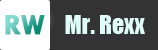
<style>
.page{position:relative;width:158px;height:50px;background:#333333}
.page>*{position:absolute;margin:0}
.t1{font:30px "TwCenMT-Bold";letter-spacing:-0.05em;font-weight:bold}
.t2{font:24px "Impact";color:#defdf8}
</style>
<div class="page">
<p class="t1" style="left:5px;top:15px;width:40px;height:20px">RW</p>
<p class="t2" style="left:65px;top:15px;width:80px;height:19px">Mr. Rexx</p>
</div>
